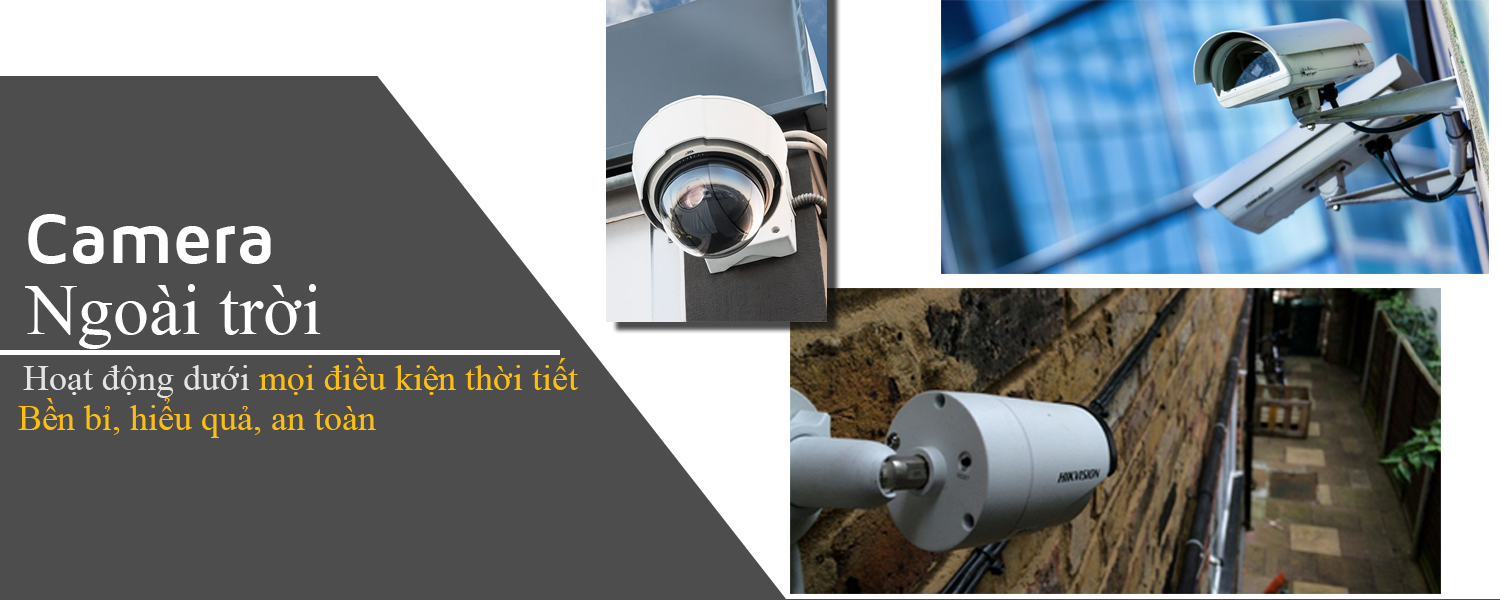
<style>
.page{position:relative;width:1500px;height:600px;background:#4d4d4d}
.page>*{position:absolute;margin:0}
.t1{font:72px "MavenProBold";color:#ffffff}
.t2{font:72px "TimesNewRomanPSMT";color:#ffffff}
.t3{font:36px "TimesNewRomanPSMT";color:#fcbf10}
.t4{font:36px "TimesNewRomanPSMT";color:#e5e4e4}
</style>
<div class="page">
<p class="t1" style="left:28px;top:214px;width:243px;height:50px">Camera</p>
<p class="t2" style="left:25px;top:284px;width:296px;height:65px">Ngoài trời</p>
<p class="t3" style="left:23px;top:358px;width:555px;height:40px"><span class="t4">Hoạt động dưới </span>mọi điều kiện thời tiết</p>
<p class="t3" style="left:18px;top:398px;width:358px;height:40px">Bền bỉ, hiểu quả, an toàn</p>
</div>
